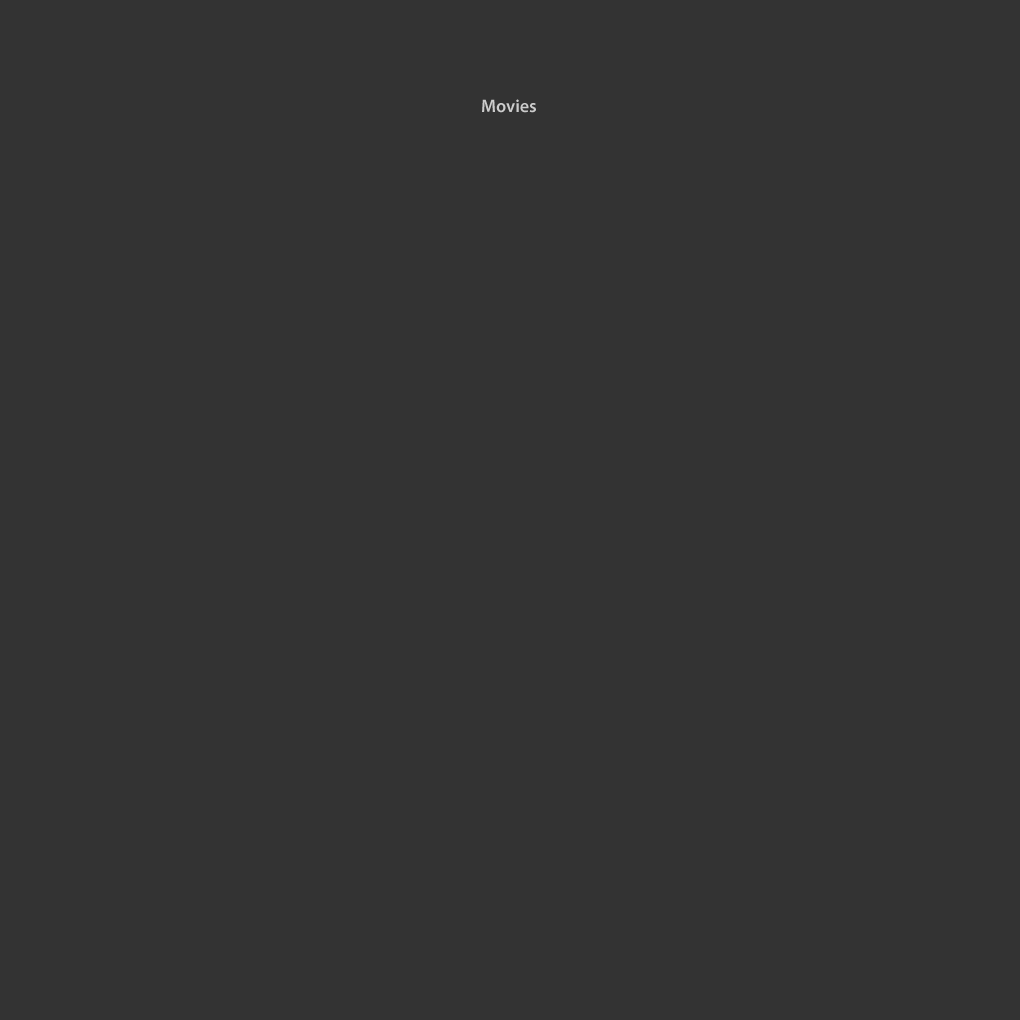
<style>
.page{position:relative;width:1020px;height:1020px;background:#333333}
.page>*{position:absolute;margin:0}
.t1{font:18px "MyriadPro-Semibold";color:#cccccc}
</style>
<div class="page">
<p class="t1" style="left:482px;top:99px;width:54px;height:14px">Movies</p>
</div>
